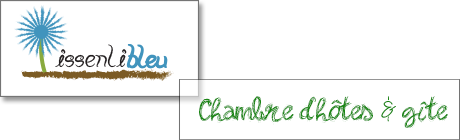
<style>
.page{position:relative;width:460px;height:140px;background:#ffffff}
.page>*{position:absolute;margin:0}
.t1{font:24.5px "PWBella";color:#1a8614}
.t2{font:24.5px "Drawing_with_markers";color:#1a8614}
</style>
<div class="page">
<p class="t1" style="left:199px;top:96px;width:249px;height:32px">Chambre d<span class="t2">’</span>hôtes <span class="t2">&amp;</span> gîte</p>
</div>
